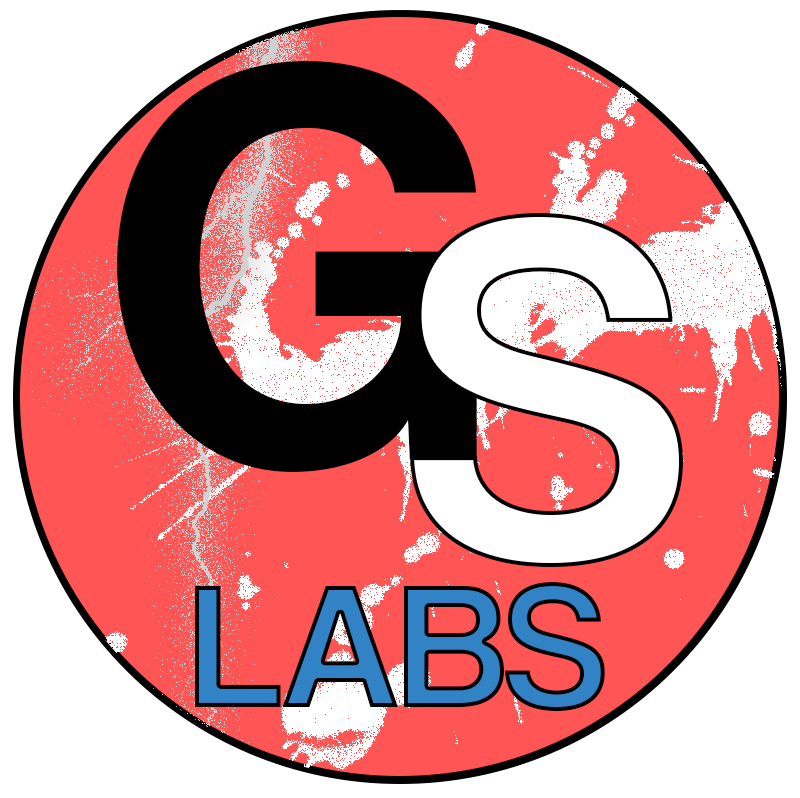
<style>
.page{position:relative;width:800px;height:798px;background:#ffffff}
.page>*{position:absolute;margin:0}
.t1{font:582px "CoolveticaRg-Regular";color:#000000}
.t2{font:499.8px "CoolveticaRg-Regular";color:#ffffff}
.t3{font:182.6px "CoolveticaRg-Regular";color:#3282c6}
</style>
<div class="page">
<p class="t1" style="left:117px;top:61px;width:360px;height:411px">G</p>
<p class="t2" style="left:410px;top:213px;width:273px;height:354px">S</p>
<p class="t3" style="left:195px;top:582px;width:410px;height:129px">LABS</p>
</div>
